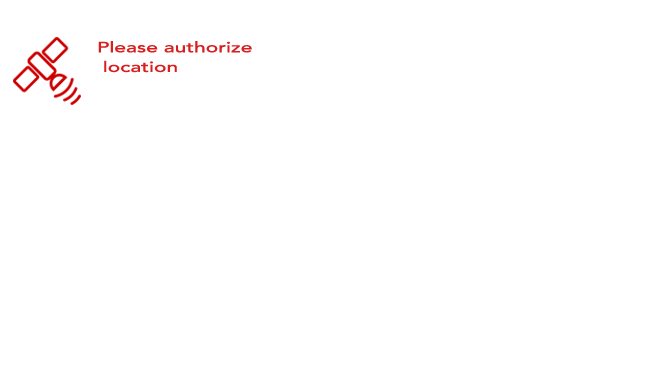
<style>
.page{position:relative;width:667px;height:375px;background:#ffffff}
.page>*{position:absolute;margin:0}
.t1{font:25.2px/3.3px "Avenir-Medium";color:#d81e1e;scale:1.43 1}
</style>
<div class="page">
<p class="t1" style="left:98px;top:41px;width:154px;height:32px">Please authorize<br><br><br><br><br><br> location</p>
</div>
